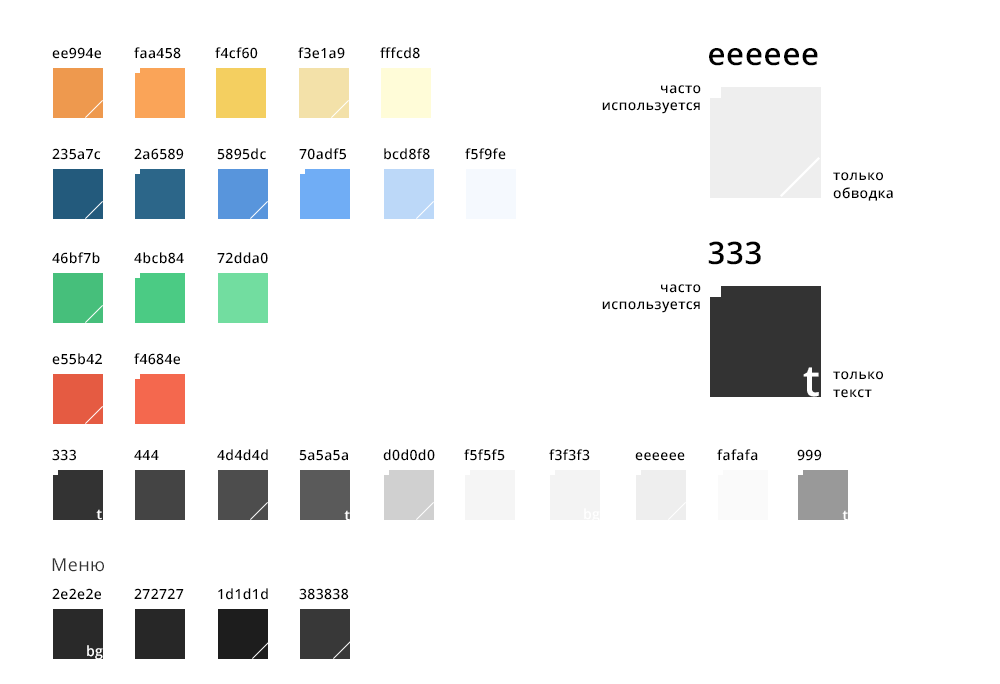
<style>
.page{position:relative;width:1000px;height:684px;background:#ffffff}
.page>*{position:absolute;margin:0}
.t1{font:14px "OpenSans-Semibold";letter-spacing:0.025em;color:#000000}
.t2{font:31.1px "OpenSans-Semibold";letter-spacing:0.025em;color:#000000}
.t3{font:43px "OpenSans-Semibold";letter-spacing:0.025em;color:#ffffff}
.t4{font:14px "OpenSans-Semibold";letter-spacing:0.025em;color:#ffffff}
.t5{font:18px "OpenSans";letter-spacing:0.025em;color:#333333}
</style>
<div class="page">
<p class="t1" style="left:52px;top:47px;width:49px;height:12px">ee994e</p>
<p class="t1" style="left:134px;top:47px;width:47px;height:12px">faa458</p>
<p class="t1" style="left:215px;top:47px;width:43px;height:12px">f4cf60</p>
<p class="t1" style="left:298px;top:47px;width:47px;height:12px">f3e1a9</p>
<p class="t1" style="left:380px;top:47px;width:40px;height:12px">fffcd8</p>
<p class="t2" style="left:709px;top:48px;width:109px;height:18px">eeeeee</p>
<p class="t1" style="left:602px;top:85px;width:99px;height:29px;text-align:right">часто<br>используется</p>
<p class="t1" style="left:52px;top:148px;width:49px;height:12px">235a7c</p>
<p class="t1" style="left:134px;top:148px;width:50px;height:12px">2a6589</p>
<p class="t1" style="left:217px;top:148px;width:49px;height:12px">5895dc</p>
<p class="t1" style="left:299px;top:148px;width:47px;height:12px">70adf5</p>
<p class="t1" style="left:384px;top:148px;width:46px;height:12px">bcd8f8</p>
<p class="t1" style="left:465px;top:148px;width:41px;height:12px">f5f9fe</p>
<p class="t1" style="left:833px;top:172px;width:60px;height:29px">только<br>обводка</p>
<p class="t2" style="left:708px;top:241px;width:53px;height:24px">333</p>
<p class="t1" style="left:52px;top:252px;width:48px;height:12px">46bf7b</p>
<p class="t1" style="left:134px;top:252px;width:50px;height:12px">4bcb84</p>
<p class="t1" style="left:217px;top:252px;width:51px;height:12px">72dda0</p>
<p class="t1" style="left:602px;top:284px;width:99px;height:29px;text-align:right">часто<br>используется</p>
<p class="t1" style="left:52px;top:353px;width:50px;height:12px">e55b42</p>
<p class="t1" style="left:134px;top:353px;width:46px;height:12px">f4684e</p>
<p class="t3" style="left:803px;top:367px;width:16px;height:30px">t</p>
<p class="t1" style="left:833px;top:371px;width:50px;height:27px">только<br>текст</p>
<p class="t1" style="left:52px;top:449px;width:24px;height:12px">333</p>
<p class="t1" style="left:217px;top:449px;width:51px;height:12px">4d4d4d</p>
<p class="t1" style="left:383px;top:449px;width:52px;height:12px">d0d0d0</p>
<p class="t1" style="left:464px;top:449px;width:41px;height:12px">f5f5f5</p>
<p class="t1" style="left:549px;top:449px;width:41px;height:12px">f3f3f3</p>
<p class="t1" style="left:717px;top:449px;width:41px;height:12px">fafafa</p>
<p class="t1" style="left:797px;top:449px;width:25px;height:12px">999</p>
<p class="t1" style="left:134px;top:450px;width:25px;height:10px">444</p>
<p class="t1" style="left:299px;top:450px;width:49px;height:11px">5a5a5a</p>
<p class="t1" style="left:635px;top:452px;width:50px;height:9px">eeeeee</p>
<p class="t4" style="left:96px;top:509px;width:6px;height:11px">t</p>
<p class="t4" style="left:344px;top:510px;width:6px;height:11px">t</p>
<p class="t4" style="left:584px;top:508px;width:16px;height:15px">bg</p>
<p class="t4" style="left:842px;top:510px;width:6px;height:11px">t</p>
<p class="t5" style="left:52px;top:558px;width:52px;height:14px">Меню</p>
<p class="t1" style="left:52px;top:588px;width:49px;height:12px">2е2е2е</p>
<p class="t1" style="left:134px;top:588px;width:50px;height:11px">272727</p>
<p class="t1" style="left:218px;top:588px;width:50px;height:12px">1d1d1d</p>
<p class="t1" style="left:299px;top:588px;width:50px;height:12px">383838</p>
<p class="t4" style="left:87px;top:645px;width:16px;height:15px">bg</p>
</div>
